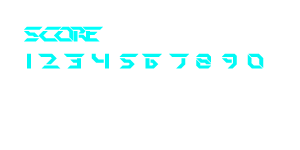
<style>
.page{position:relative;width:300px;height:150px;background:#ffffff}
.page>*{position:absolute;margin:0}
.t1{font:20.8px "PerfectDark(BRK)";color:#00fffb}
.t2{font:20.8px "PerfectDark(BRK)";color:#00f9f5}
</style>
<div class="page">
<p class="t1" style="left:24px;top:26px;width:79px;height:16px">score</p>
<p class="t2" style="left:27px;top:53px;width:237px;height:16px">1 2 3 4 5 6 7 8 9 0</p>
</div>
